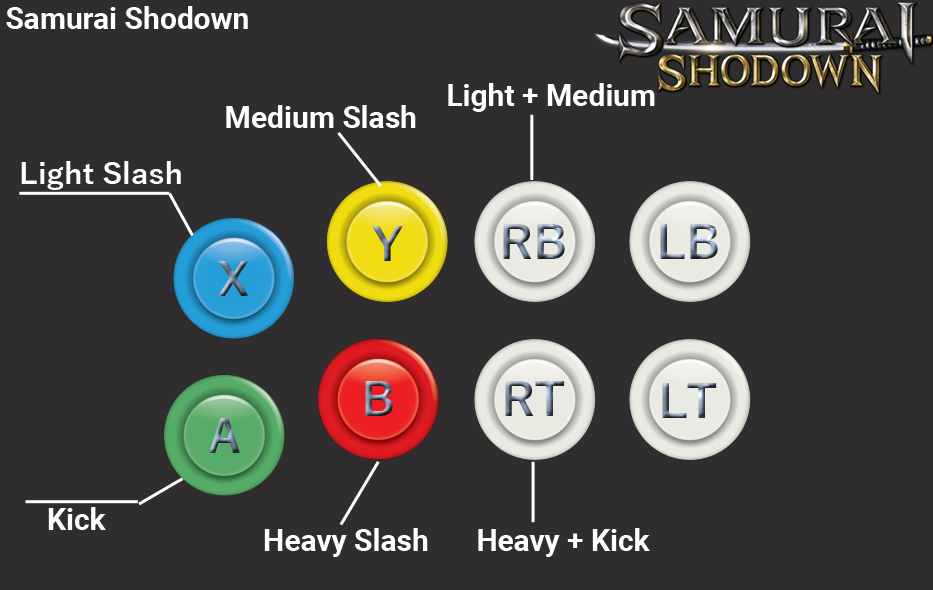
<style>
.page{position:relative;width:933px;height:590px;background:#2f2d2e}
.page>*{position:absolute;margin:0}
.t1{font:30px "Roboto-Bold";color:#ffffff}
.t2{font:30px "YuGothic-Bold";color:#ffffff}
</style>
<div class="page">
<p class="t1" style="left:6px;top:6px;width:242px;height:23px">Samurai Shodown</p>
<p class="t1" style="left:448px;top:83px;width:207px;height:29px">Light + Medium</p>
<p class="t1" style="left:226px;top:105px;width:190px;height:23px">Medium Slash</p>
<p class="t2" style="left:21px;top:161px;width:160px;height:29px">Light Slash</p>
<p class="t1" style="left:48px;top:507px;width:58px;height:23px">Kick</p>
<p class="t1" style="left:264px;top:528px;width:164px;height:29px">Heavy Slash</p>
<p class="t1" style="left:478px;top:528px;width:172px;height:29px">Heavy + Kick</p>
</div>
